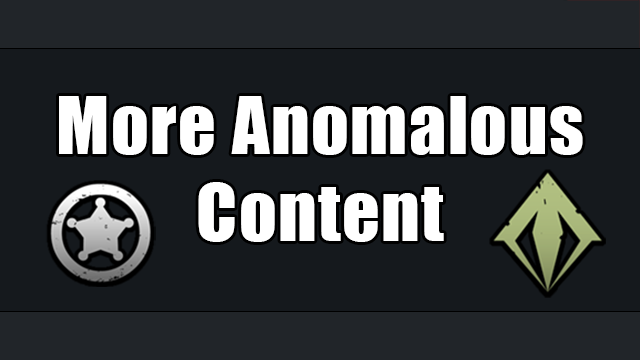
<style>
.page{position:relative;width:640px;height:360px;background:#15191d}
.page>*{position:absolute;margin:0}
.t1{font:72.7px "Impact";letter-spacing:0.02em;color:#ffffff}
</style>
<div class="page">
<p class="t1" style="left:59px;top:96px;width:524px;height:146px;text-align:center">More Anomalous Content</p>
</div>
